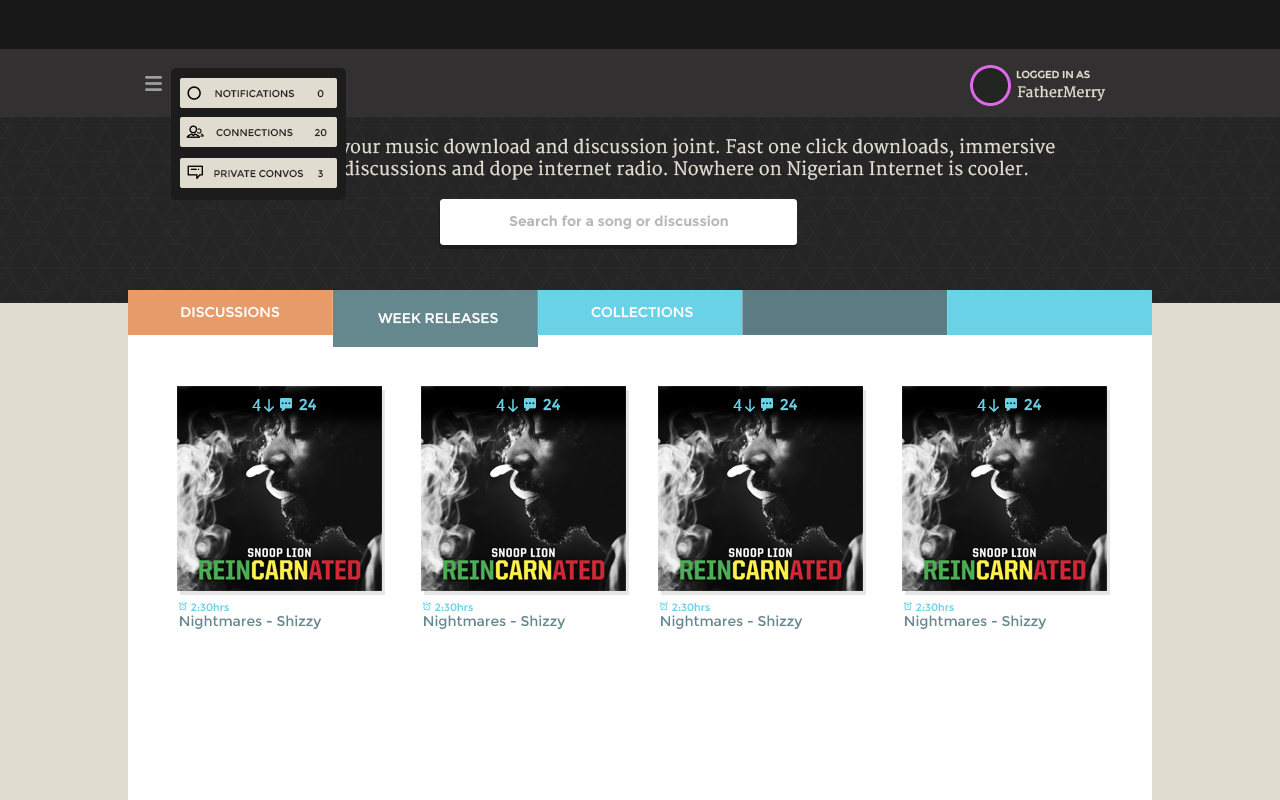
<style>
.page{position:relative;width:1280px;height:800px;background:#ffffff}
.page>*{position:absolute;margin:0}
.t1{font:10px "Montserrat-Regular";color:#e0dccf}
.t2{font:9.9px "Montserrat-Regular";color:#232522}
.t3{font:14px "Merriweather";color:#e0dccf}
.t4{font:18px "Merriweather";color:#e0dccf}
.t5{font:14px "Montserrat-Bold";color:#b6b9ba}
.t6{font:14px "Montserrat-Regular";color:#ffffff}
.t7{font:15.6px "ArialMT";color:#69d2e7}
.t8{font:15.6px "Montserrat-Regular";color:#69d2e7}
.t9{font:10.5px "Montserrat-Regular";color:#69d2e7}
.t10{font:14px "Montserrat-Regular";color:#65878e}
</style>
<div class="page">
<p class="t1" style="left:1016px;top:70px;width:74px;height:9px">LOGGED IN AS</p>
<p class="t2" style="left:215px;top:89px;width:80px;height:9px">NOTIFICATIONS</p>
<p class="t2" style="left:317px;top:89px;width:7px;height:9px">0</p>
<p class="t3" style="left:1017px;top:85px;width:89px;height:16px">FatherMerry</p>
<p class="t2" style="left:216px;top:128px;width:77px;height:9px">CONNECTIONS</p>
<p class="t2" style="left:314px;top:128px;width:13px;height:9px">20</p>
<p class="t4" style="left:259px;top:138px;width:796px;height:42px;text-align:center">Grumi is your music download and discussion joint. Fast one click downloads, immersive music discussions and dope internet radio. Nowhere on Nigerian Internet is cooler.</p>
<p class="t2" style="left:214px;top:169px;width:90px;height:9px">PRIVATE CONVOS</p>
<p class="t2" style="left:318px;top:170px;width:5px;height:8px">3</p>
<p class="t5" style="left:509px;top:215px;width:219px;height:15px">Search for a song or discussion</p>
<p class="t6" style="left:181px;top:306px;width:99px;height:12px">DISCUSSIONS</p>
<p class="t6" style="left:378px;top:312px;width:120px;height:12px">WEEK RELEASES</p>
<p class="t6" style="left:591px;top:306px;width:102px;height:12px">COLLECTIONS</p>
<p class="t7" style="left:252px;top:399px;width:9px;height:12px">4</p>
<p class="t8" style="left:299px;top:398px;width:18px;height:13px">24</p>
<p class="t7" style="left:496px;top:399px;width:9px;height:12px">4</p>
<p class="t8" style="left:543px;top:398px;width:18px;height:13px">24</p>
<p class="t7" style="left:733px;top:399px;width:9px;height:12px">4</p>
<p class="t8" style="left:780px;top:398px;width:18px;height:13px">24</p>
<p class="t7" style="left:977px;top:399px;width:9px;height:12px">4</p>
<p class="t8" style="left:1024px;top:398px;width:18px;height:13px">24</p>
<p class="t9" style="left:191px;top:603px;width:38px;height:9px">2:30hrs</p>
<p class="t9" style="left:435px;top:603px;width:38px;height:9px">2:30hrs</p>
<p class="t9" style="left:672px;top:603px;width:38px;height:9px">2:30hrs</p>
<p class="t9" style="left:916px;top:603px;width:38px;height:9px">2:30hrs</p>
<p class="t10" style="left:179px;top:615px;width:143px;height:15px">Nightmares - Shizzy</p>
<p class="t10" style="left:423px;top:615px;width:143px;height:15px">Nightmares - Shizzy</p>
<p class="t10" style="left:660px;top:615px;width:143px;height:15px">Nightmares - Shizzy</p>
<p class="t10" style="left:904px;top:615px;width:143px;height:15px">Nightmares - Shizzy</p>
</div>
